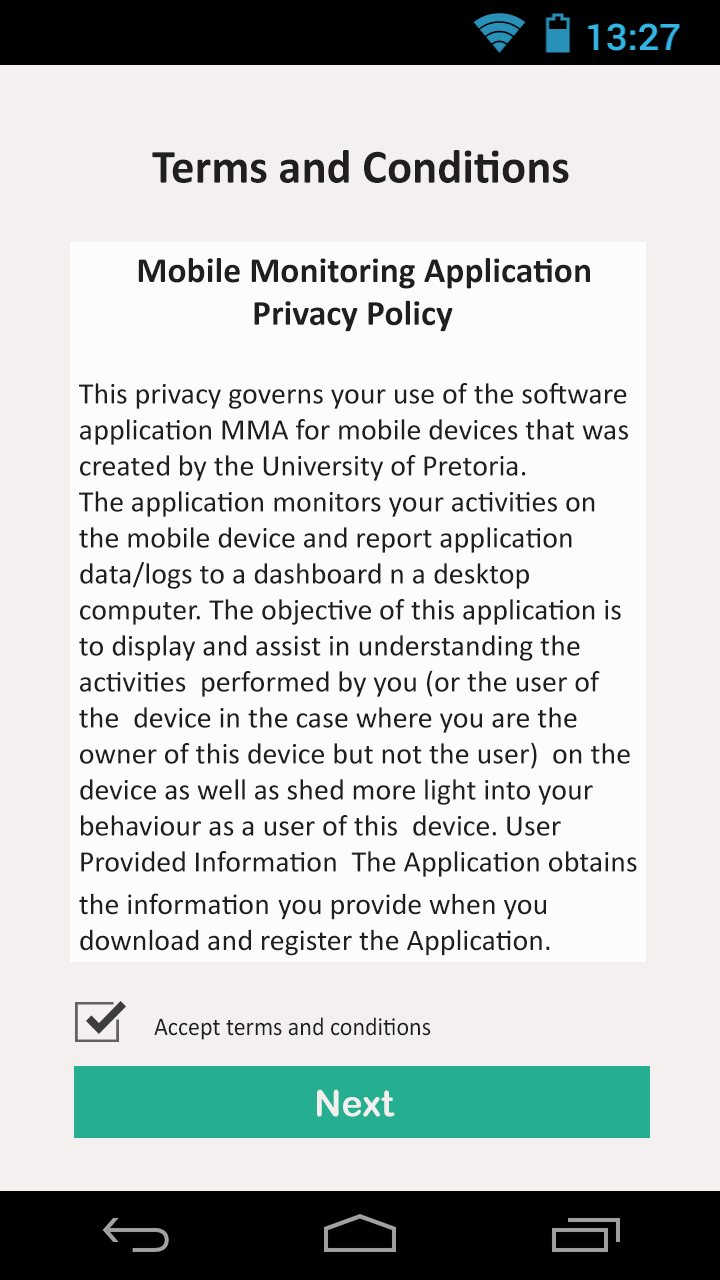
<style>
.page{position:relative;width:720px;height:1280px;background:#f5f0f0}
.page>*{position:absolute;margin:0}
.t1{font:48px "Calibri-Bold";color:#1f1f1f}
.t2{font:30px "Calibri";color:#1f1f1f}
.t3{font:35.6px "Calibri-Bold";color:#1f1f1f}
.t4{font:25.8px "Calibri";color:#1f1f1f;scale:0.93 1}
.t5{font:36px "ArialRoundedMTBold";color:#f2efef}
</style>
<div class="page">
<p class="t1" style="left:152px;top:150px;width:417px;height:33px">Terms and Conditions</p>
<p class="t2" style="left:79px;top:258px;width:558px;height:698px"><span class="t3">        Mobile Monitoring Application<br>     Privacy Policy<br><br></span> This privacy governs your use of the software<br> application MMA for mobile devices that was<br> created by the University of Pretoria.<br> The application monitors your activities on <br> the mobile device and report application <br> data/logs to a dashboard n a desktop <br> computer. The objective of this application is<br> to display and assist in understanding the<br> activities  performed by you (or the user of <br> the  device in the case where you are the <br> owner of this device but not the user)  on the <br> device as well as shed more light into your<br> behaviour as a user of this  device. User<br> Provided Information  The Application obtains <br> the information you provide when you<br> download and register the Application.</p>
<p class="t4" style="left:154px;top:1017px;width:277px;height:23px">Accept terms and conditions</p>
<p class="t5" style="left:317px;top:1089px;width:78px;height:28px">Next</p>
</div>
